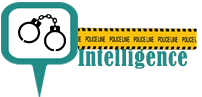
<style>
.page{position:relative;width:202px;height:97px;background:#ffffff}
.page>*{position:absolute;margin:0}
.t1{font:22px "BernardMT-Condensed";letter-spacing:0.04em;color:#238c87}
</style>
<div class="page">
<p class="t1" style="left:78px;top:48px;width:109px;height:21px">Intelligence</p>
</div>
